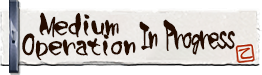
<style>
.page{position:relative;width:262px;height:75px;background:#ffffff}
.page>*{position:absolute;margin:0}
.t1{font:30px/20px "TA_taoyame";letter-spacing:-0.1em;color:#240c00;font-weight:bold}
.t2{font:36px "TA_taoyame";letter-spacing:-0.16em;color:#240c00;font-weight:bold;scale:0.62 1}
</style>
<div class="page">
<p class="t1" style="left:22px;top:12px;width:114px;height:49px;text-align:center">Medium<br>Operation</p>
<p class="t2" style="left:139px;top:19px;width:96px;height:36px">In Progress</p>
</div>
